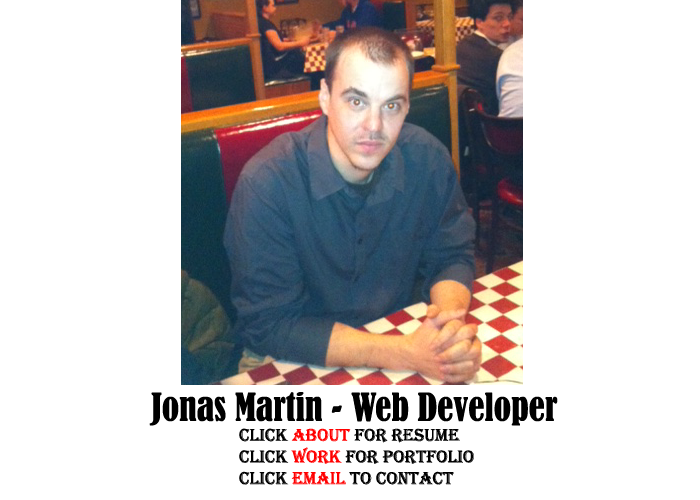
<style>
.page{position:relative;width:700px;height:500px;background:#ffffff}
.page>*{position:absolute;margin:0}
.t1{font:36px "BernardMT-Condensed";color:#000000}
.t2{font:18px "Algerian";color:#000000}
.t3{font:18px "Algerian";color:#ff0000}
</style>
<div class="page">
<p class="t1" style="left:149px;top:392px;width:409px;height:34px">Jonas Martin - Web Developer</p>
<p class="t2" style="left:239px;top:428px;width:235px;height:57px">Click<span class="t3"> About</span> for resume<br>click <span class="t3">work</span> for portfolio<br>click <span class="t3">email</span> to contact</p>
</div>
